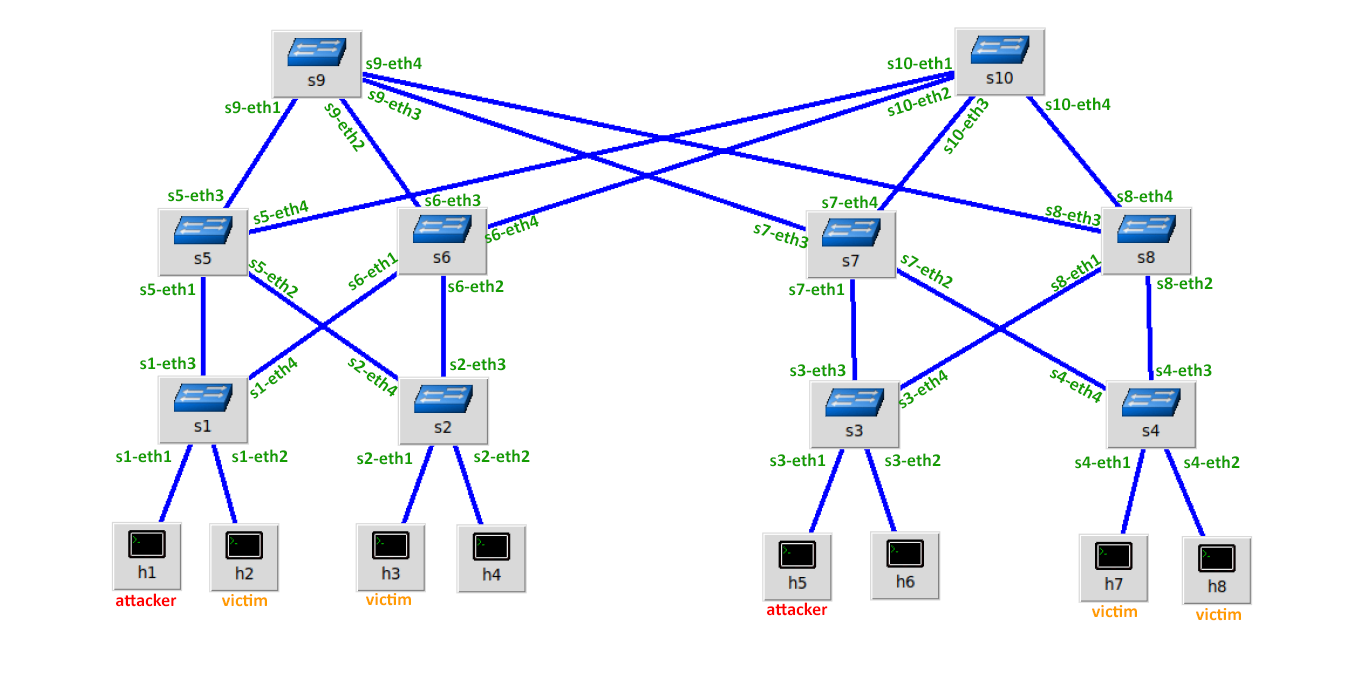
<style>
.page{position:relative;width:1355px;height:677px;background:#ffffff}
.page>*{position:absolute;margin:0}
.t1{font:18.3px "Calibri-Bold";color:#159c03}
.t2{font:18.3px "Calibri-Bold";color:#ff0000}
.t3{font:18.3px "Calibri-Bold";color:#ff9c00}
</style>
<div class="page">
<p class="t1" style="left:366px;top:56px;width:56px;height:14px">s9-eth4</p>
<p class="t1" style="left:887px;top:56px;width:65px;height:14px">s10-eth1</p>
<p class="t1" style="left:887px;top:87px;width:65px;height:30px;rotate:-17deg">s10-eth2</p>
<p class="t1" style="left:225px;top:100px;width:56px;height:14px">s9-eth1</p>
<p class="t1" style="left:367px;top:91px;width:55px;height:29px;rotate:24deg">s9-eth3</p>
<p class="t1" style="left:944px;top:98px;width:45px;height:57px;rotate:-52deg">s10-eth3</p>
<p class="t1" style="left:1045px;top:97px;width:66px;height:14px">s10-eth4</p>
<p class="t1" style="left:324px;top:103px;width:41px;height:49px;rotate:54deg">s9-eth2</p>
<p class="t1" style="left:168px;top:188px;width:56px;height:14px">s5-eth3</p>
<p class="t1" style="left:425px;top:193px;width:56px;height:14px">s6-eth3</p>
<p class="t1" style="left:822px;top:195px;width:56px;height:14px">s7-eth4</p>
<p class="t1" style="left:1117px;top:189px;width:56px;height:14px">s8-eth4</p>
<p class="t1" style="left:253px;top:200px;width:56px;height:25px;rotate:-14deg">s5-eth4</p>
<p class="t1" style="left:1045px;top:205px;width:56px;height:21px;rotate:12deg">s8-eth3</p>
<p class="t1" style="left:484px;top:215px;width:55px;height:29px;rotate:-19deg">s6-eth4</p>
<p class="t1" style="left:753px;top:223px;width:56px;height:26px;rotate:17deg">s7-eth3</p>
<p class="t1" style="left:348px;top:252px;width:51px;height:39px;rotate:-33deg">s6-eth1</p>
<p class="t1" style="left:900px;top:255px;width:53px;height:34px;rotate:30deg">s7-eth2</p>
<p class="t1" style="left:1051px;top:254px;width:51px;height:38px;rotate:-32deg">s8-eth1</p>
<p class="t1" style="left:248px;top:259px;width:50px;height:40px;rotate:37deg">s5-eth2</p>
<p class="t1" style="left:448px;top:279px;width:56px;height:14px">s6-eth2</p>
<p class="t1" style="left:1157px;top:276px;width:56px;height:14px">s8-eth2</p>
<p class="t1" style="left:140px;top:282px;width:56px;height:14px">s5-eth1</p>
<p class="t1" style="left:789px;top:282px;width:56px;height:14px">s7-eth1</p>
<p class="t1" style="left:140px;top:356px;width:56px;height:14px">s1-eth3</p>
<p class="t1" style="left:250px;top:357px;width:48px;height:42px;rotate:-37deg">s1-eth4</p>
<p class="t1" style="left:347px;top:358px;width:51px;height:39px;rotate:37deg">s2-eth4</p>
<p class="t1" style="left:450px;top:357px;width:56px;height:14px">s2-eth3</p>
<p class="t1" style="left:790px;top:363px;width:56px;height:14px">s3-eth3</p>
<p class="t1" style="left:1156px;top:363px;width:56px;height:14px">s4-eth3</p>
<p class="t1" style="left:898px;top:369px;width:50px;height:40px;rotate:-33deg">s3-eth4</p>
<p class="t1" style="left:1049px;top:369px;width:54px;height:34px;rotate:29deg">s4-eth4</p>
<p class="t1" style="left:116px;top:449px;width:56px;height:14px">s1-eth1</p>
<p class="t1" style="left:232px;top:449px;width:56px;height:14px">s1-eth2</p>
<p class="t1" style="left:474px;top:449px;width:56px;height:14px">s2-eth2</p>
<p class="t1" style="left:357px;top:451px;width:56px;height:14px">s2-eth1</p>
<p class="t1" style="left:770px;top:453px;width:56px;height:14px">s3-eth1</p>
<p class="t1" style="left:885px;top:453px;width:56px;height:14px">s3-eth2</p>
<p class="t1" style="left:1075px;top:455px;width:56px;height:14px">s4-eth1</p>
<p class="t1" style="left:1184px;top:455px;width:56px;height:14px">s4-eth2</p>
<p class="t2" style="left:116px;top:593px;width:61px;height:14px">attacker</p>
<p class="t3" style="left:366px;top:593px;width:45px;height:13px">victim</p>
<p class="t3" style="left:222px;top:594px;width:45px;height:13px">victim</p>
<p class="t2" style="left:767px;top:602px;width:61px;height:14px">attacker</p>
<p class="t3" style="left:1092px;top:605px;width:45px;height:13px">victim</p>
<p class="t3" style="left:1196px;top:608px;width:45px;height:13px">victim</p>
</div>
